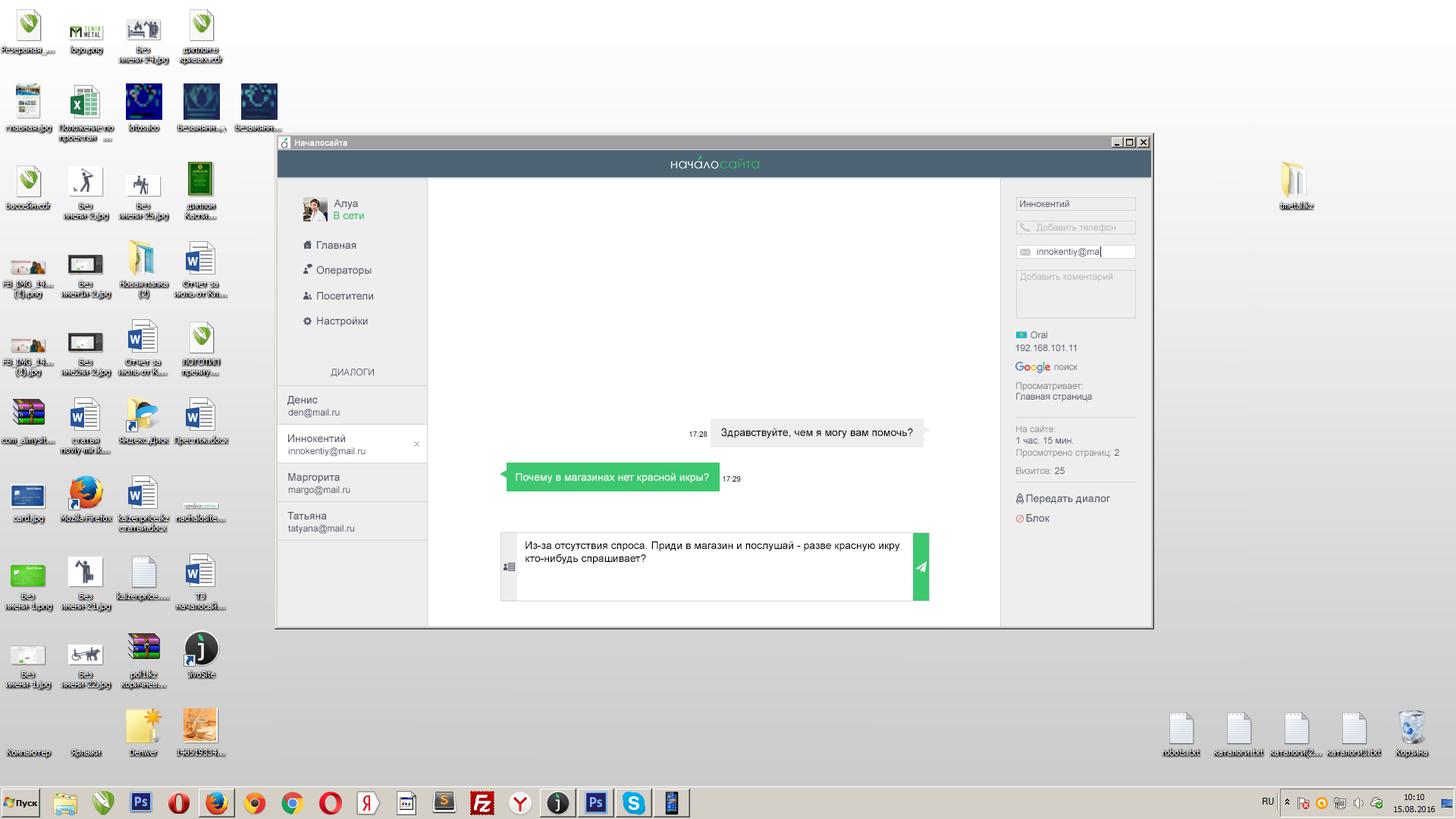
<style>
.page{position:relative;width:1456px;height:819px;background:#ffffff}
.page>*{position:absolute;margin:0}
.t1{font:10.9px "CenturyGothic";color:#3f414d;scale:0.95 1}
.t2{font:8.3px "ArialMT";color:#ffffff;font-weight:bold}
.t3{font:13.3px "CenturyGothic";color:#ffffff}
.t4{font:13.3px "CenturyGothic";color:#34ba65}
.t5{font:10.6px "ArialMT";color:#515567}
.t6{font:9.1px "ArialMT";color:#515567}
.t7{font:10.6px "ArialMT";color:#34ba65}
.t8{font:9.1px "ArialMT";color:#b9b9b9}
.t9{font:9.1px "ArialMT";color:#b5b5b5}
.t10{font:9.1px "ArialMT";color:#787878}
.t11{font:9.1px "ArialMT";color:#868686}
.t12{font:9.1px "ArialMT";color:#939393}
.t13{font:7.6px "ArialMT";color:#000000}
.t14{font:10.6px "ArialMT";color:#010101}
.t15{font:10.6px "ArialMT";color:#ffffff}
.t16{font:10.6px "ArialMT";color:#000000}
</style>
<div class="page">
<p class="t1" style="left:281px;top:142px;width:6px;height:7px">а</p>
<p class="t2" style="left:295px;top:139px;width:52px;height:7px">Началосайта</p>
<p class="t3" style="left:671px;top:158px;width:88px;height:11px">начало<span class="t4">сайта</span></p>
<p class="t5" style="left:334px;top:199px;width:24px;height:10px">Алуа</p>
<p class="t6" style="left:1020px;top:200px;width:49px;height:7px">Иннокентий</p>
<p class="t7" style="left:334px;top:212px;width:30px;height:7px">В сети</p>
<p class="t8" style="left:1037px;top:224px;width:79px;height:33px"><span class="t6"><br><br></span>Добавить телефон<br><br><span class="t6">innokentiy@ma</span></p>
<p class="t5" style="left:316px;top:241px;width:57px;height:86px">Главная<br><br>Операторы<br><br>Посетители<br><br>Настройки</p>
<p class="t8" style="left:1020px;top:273px;width:92px;height:9px">Добавить коментарий</p>
<p class="t6" style="left:1031px;top:331px;width:16px;height:8px"><span class="t9"><br>      </span>Oral</p>
<p class="t6" style="left:1015px;top:344px;width:61px;height:7px">192.168.101.11</p>
<p class="t10" style="left:1054px;top:365px;width:24px;height:5px">поиск</p>
<p class="t6" style="left:331px;top:369px;width:43px;height:8px">ДИАЛОГИ</p>
<p class="t6" style="left:1016px;top:382px;width:76px;height:20px"><span class="t11">Просматривает: <br></span>Главная страница</p>
<p class="t5" style="left:287px;top:396px;width:31px;height:10px">Денис</p>
<p class="t6" style="left:288px;top:409px;width:52px;height:9px">den@mail.ru</p>
<p class="t6" style="left:1016px;top:425px;width:58px;height:19px"><span class="t12">На сайте: <br></span>1 час. 15 мин.</p>
<p class="t5" style="left:288px;top:434px;width:57px;height:8px">Иннокентий</p>
<p class="t13" style="left:689px;top:431px;width:19px;height:6px">17:28</p>
<p class="t14" style="left:721px;top:428px;width:192px;height:10px">Здравствуйте, чем я могу вам помочь?</p>
<p class="t6" style="left:288px;top:447px;width:78px;height:10px">innokentiy@mail.ru</p>
<p class="t12" style="left:1016px;top:449px;width:103px;height:9px">Просмотрено страниц: <span class="t6">2</span></p>
<p class="t5" style="left:288px;top:473px;width:52px;height:10px">Маргорита</p>
<p class="t15" style="left:516px;top:472px;width:193px;height:11px">Почему в магазинах нет красной икры?</p>
<p class="t12" style="left:1016px;top:467px;width:49px;height:7px">Визитов: <span class="t6">25</span></p>
<p class="t13" style="left:723px;top:475px;width:18px;height:7px">17:29</p>
<p class="t6" style="left:288px;top:486px;width:62px;height:9px">margo@mail.ru</p>
<p class="t5" style="left:1026px;top:494px;width:84px;height:10px">Передать диалог</p>
<p class="t5" style="left:287px;top:512px;width:40px;height:7px">Татьяна</p>
<p class="t5" style="left:1026px;top:514px;width:24px;height:8px">Блок</p>
<p class="t6" style="left:288px;top:525px;width:66px;height:9px">tatyana@mail.ru</p>
<p class="t16" style="left:526px;top:541px;width:374px;height:23px">Из-за отсутствия спроса. Приди в магазин и послушай - разве красную икру <br>кто-нибудь спрашивает?</p>
</div>
